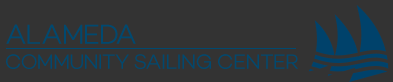
<style>
.page{position:relative;width:393px;height:82px;background:#333333}
.page>*{position:absolute;margin:0}
.t1{font:21px "Campton-LightDEMO";letter-spacing:-0.04em;color:#004970}
.t2{font:28px "Campton-LightDEMO";letter-spacing:-0.04em;color:#004970}
</style>
<div class="page">
<p class="t1" style="left:6px;top:24px;width:292px;height:45px"><span class="t2">ALAMEDA<br></span>COMMUNITY SAILING CENTER</p>
</div>
